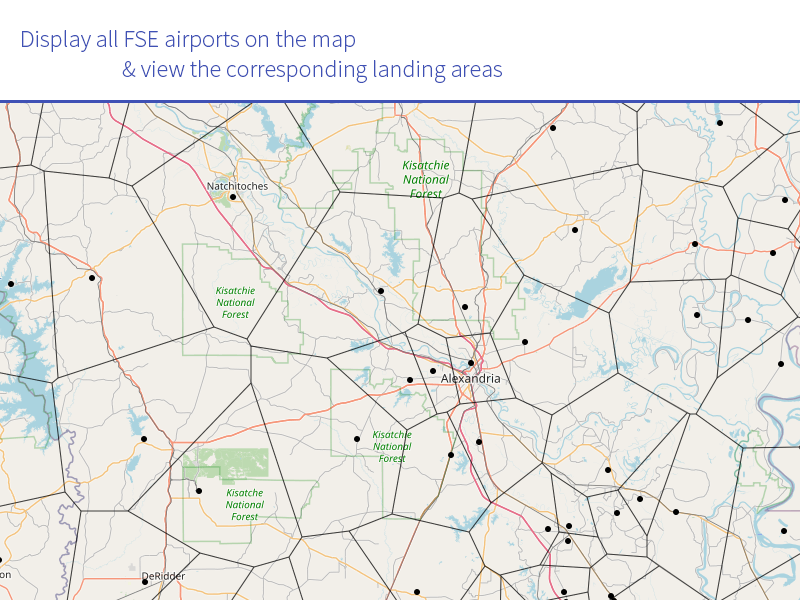
<style>
.page{position:relative;width:800px;height:600px;background:#f2efe9}
.page>*{position:absolute;margin:0}
.t1{font:24px "SourceSansPro-Light";color:#3f51b5}
</style>
<div class="page">
<p class="t1" style="left:22px;top:30px;width:333px;height:22px">Display all FSE airports on the map</p>
<p class="t1" style="left:122px;top:60px;width:380px;height:23px">&amp; view the corresponding landing areas</p>
</div>
